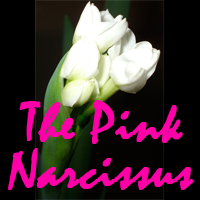
<style>
.page{position:relative;width:200px;height:200px;background:#000000}
.page>*{position:absolute;margin:0}
.t1{font:55px "Mistral";color:#ff00a8;font-weight:bold}
</style>
<div class="page">
<p class="t1" style="left:19px;top:100px;width:164px;height:44px">The Pink</p>
<p class="t1" style="left:8px;top:148px;width:186px;height:42px">Narcissus</p>
</div>
